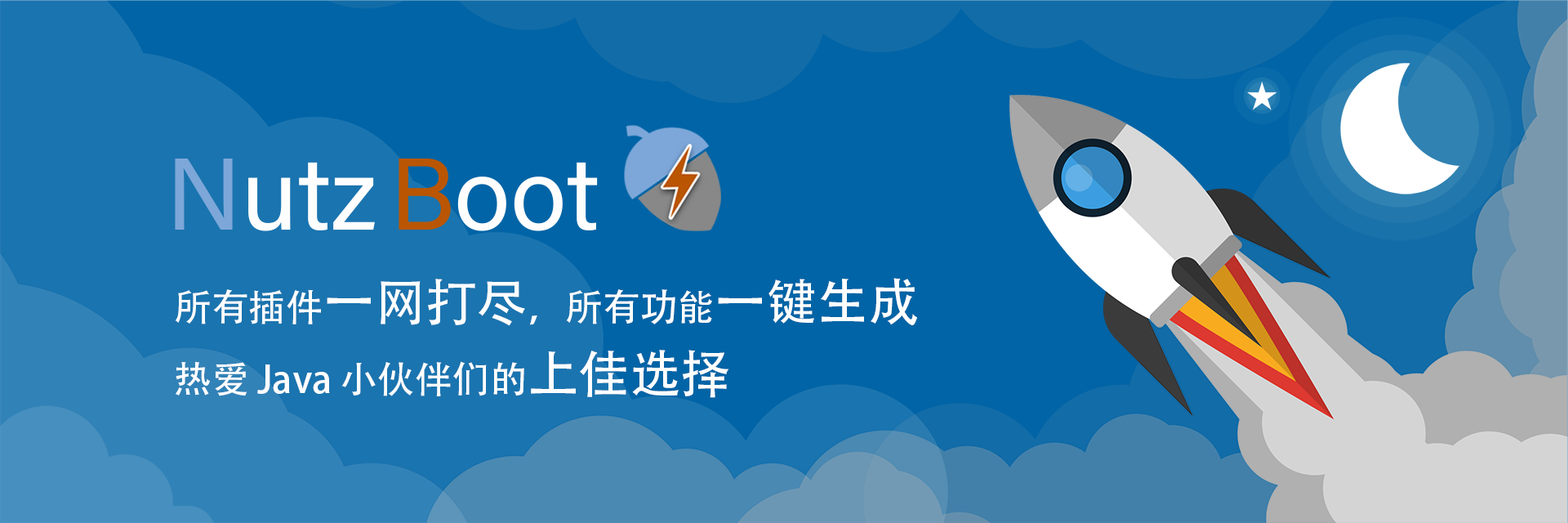
<style>
.page{position:relative;width:1568px;height:523px;background:#0064a6}
.page>*{position:absolute;margin:0}
.t1{font:37.4px/71.5px "AdobeHeitiStd-Regular";color:#fefefe}
.t2{font:51px/71.5px "AdobeHeitiStd-Regular";color:#fefefe}
</style>
<div class="page">
<p class="t1" style="left:175px;top:278px;width:742px;height:120px">所有插件<span class="t2">一网打尽</span>，所有功能<span class="t2">一键生成<br></span>热爱 Java 小伙伴们的<span class="t2">上佳选择</span></p>
</div>
